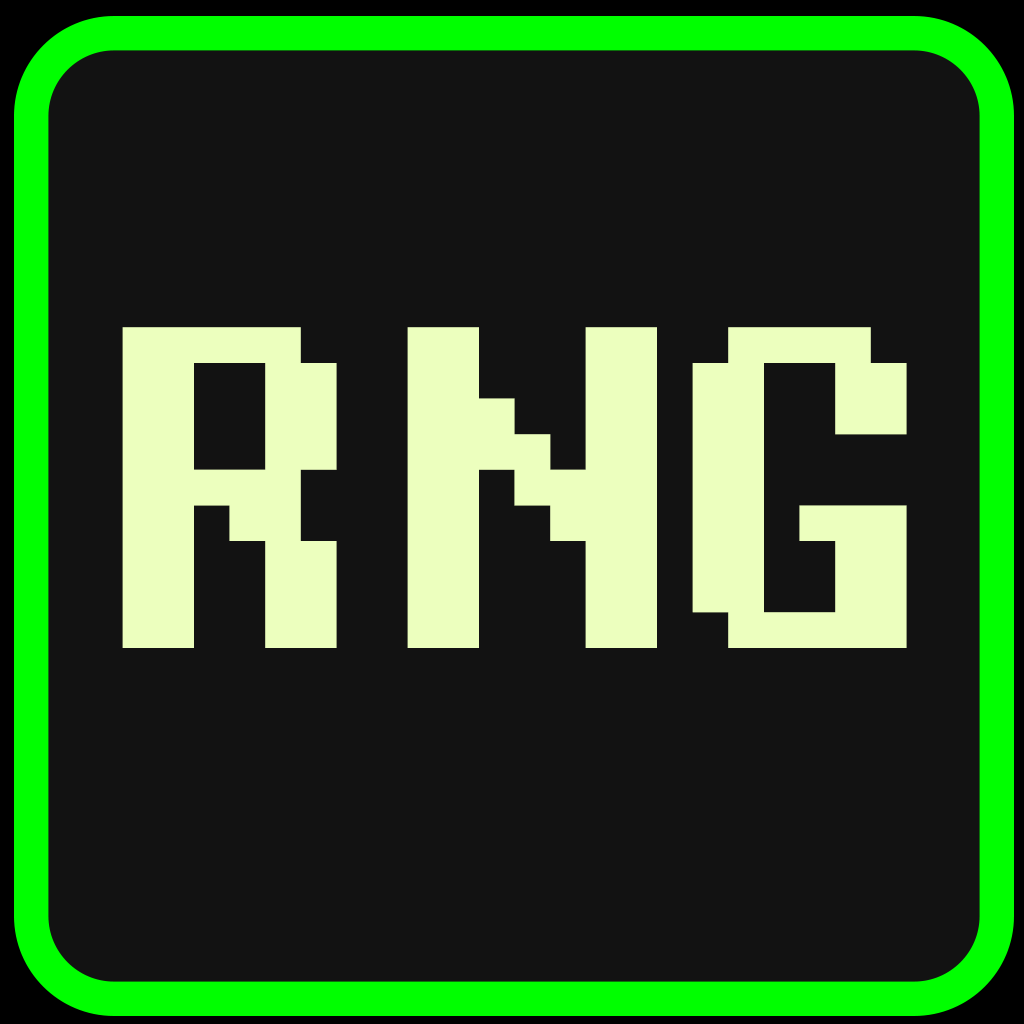
<style>
.page{position:relative;width:1024px;height:1024px;background:#121212}
.page>*{position:absolute;margin:0}
.t1{font:456px "Fixedsys";color:#ecffbe}
</style>
<div class="page">
<p class="t1" style="left:122px;top:327px;width:785px;height:321px">RNG</p>
</div>
